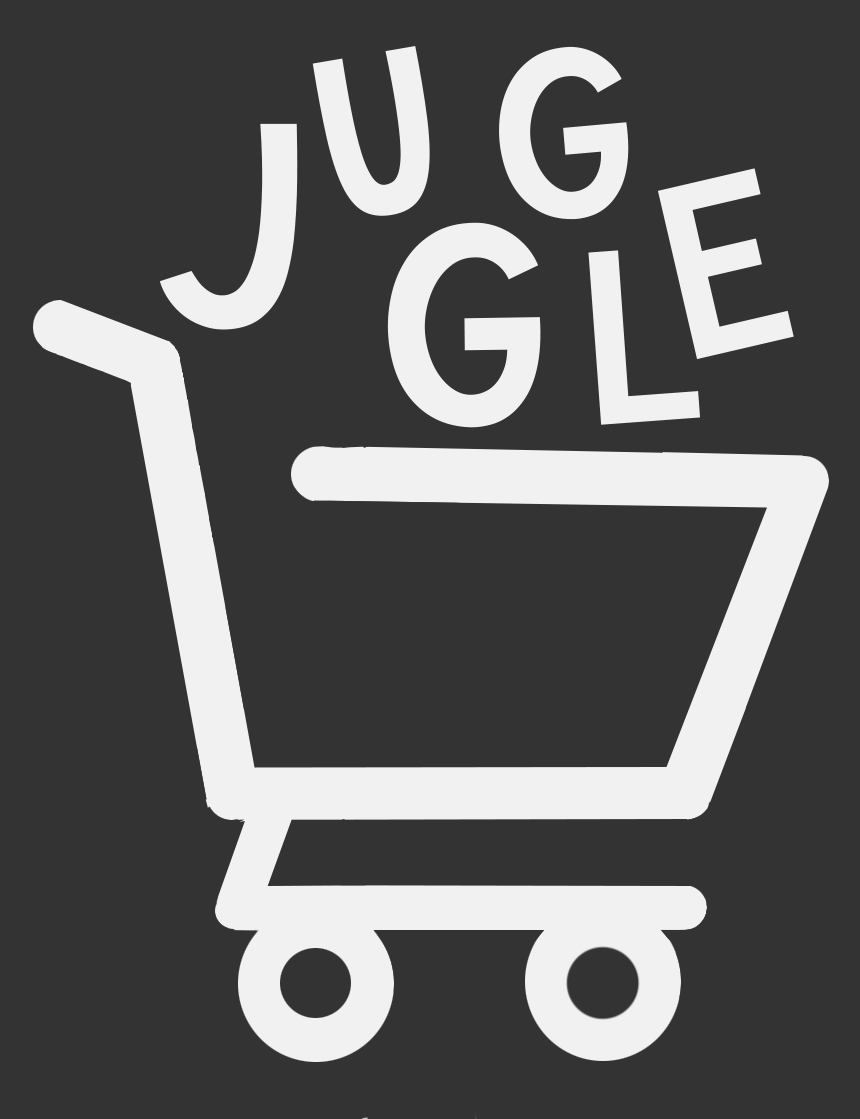
<style>
.page{position:relative;width:860px;height:1119px;background:#333333}
.page>*{position:absolute;margin:0}
.t1{font:240.8px "KGWhattheTeacherWants";color:#f1f1f1}
.t2{font:252.5px "KGWhattheTeacherWants";color:#f1f1f1}
.t3{font:300px "KGWhattheTeacherWants";color:#f1f1f1}
</style>
<div class="page">
<p class="t1" style="left:312px;top:46px;width:118px;height:170px;rotate:-10deg">U</p>
<p class="t2" style="left:499px;top:46px;width:130px;height:174px;rotate:-4deg">G</p>
<p class="t3" style="left:159px;top:123px;width:139px;height:207px">J</p>
<p class="t2" style="left:657px;top:168px;width:137px;height:192px;rotate:-13deg">E</p>
<p class="t3" style="left:387px;top:222px;width:154px;height:206px">G</p>
<p class="t2" style="left:588px;top:250px;width:113px;height:175px;rotate:-4deg">L</p>
</div>
